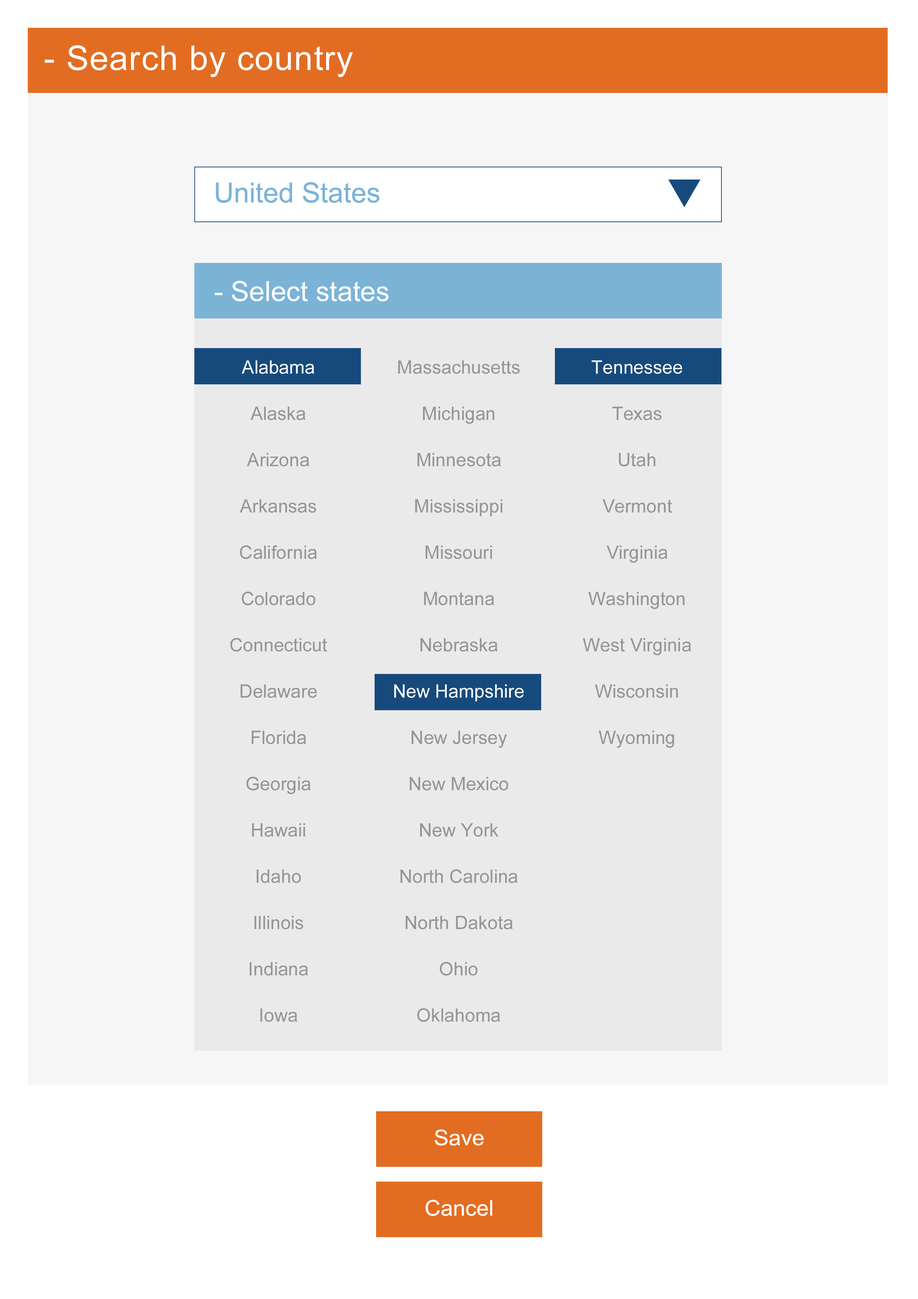
<style>
.page{position:relative;width:918px;height:1299px;background:#f7f6f6}
.page>*{position:absolute;margin:0}
.t1{font:33.9px "ArialMT";letter-spacing:0.025em;color:#ffffff}
.t2{font:27.8px "ArialMT";color:#7bb3d7}
.t3{font:27.8px "ArialMT";color:#ffffff}
.t4{font:18.5px/46.3px "ArialMT";color:#959595}
.t5{font:18.5px/46.3px "ArialMT";color:#ffffff}
.t6{font:21.6px "ArialMT";color:#ffffff}
</style>
<div class="page">
<p class="t1" style="left:44px;top:45px;width:309px;height:32px">- Search by country</p>
<p class="t2" style="left:216px;top:182px;width:163px;height:21px">United States</p>
<p class="t3" style="left:215px;top:281px;width:174px;height:20px">- Select states</p>
<p class="t4" style="left:230px;top:360px;width:97px;height:662px;text-align:center"><span class="t5">Alabama<br></span>Alaska<br>Arizona<br>Arkansas<br>California<br>Colorado<br>Connecticut<br>Delaware<br>Florida<br>Georgia<br>Hawaii<br>Idaho<br>Illinois<br>Indiana<br>Iowa<br>Kansas<br>Kentucky<br>Louisiana<br>Maine<br>Maryland</p>
<p class="t4" style="left:394px;top:360px;width:130px;height:662px;text-align:center">Massachusetts<br>Michigan<br>Minnesota<br>Mississippi<br>Missouri<br>Montana<br>Nebraska<br><span class="t5">New Hampshire<br></span>New Jersey<br>New Mexico<br>New York<br>North Carolina<br>North Dakota<br>Ohio<br>Oklahoma<br>Oregona<br>Pennsylvania<br>Rhode Island<br>South Carolina<br>South Dakota</p>
<p class="t4" style="left:583px;top:360px;width:108px;height:388px;text-align:center"><span class="t5">Tennessee<br></span>Texas<br>Utah<br>Vermont<br>Virginia<br>Washington<br>West Virginia<br>Wisconsin<br>Wyoming</p>
<p class="t6" style="left:435px;top:1129px;width:49px;height:16px">Save</p>
<p class="t6" style="left:425px;top:1200px;width:67px;height:16px">Cancel</p>
</div>
